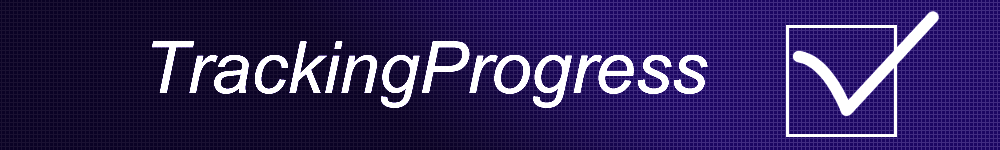
<style>
.page{position:relative;width:1000px;height:150px}
.page>*{position:absolute;margin:0}
.t1{font:72px "Arial-ItalicMT";color:#ffffff}
</style>
<div class="page">
<p class="t1" style="left:152px;top:41px;width:556px;height:67px">TrackingProgress</p>
</div>
